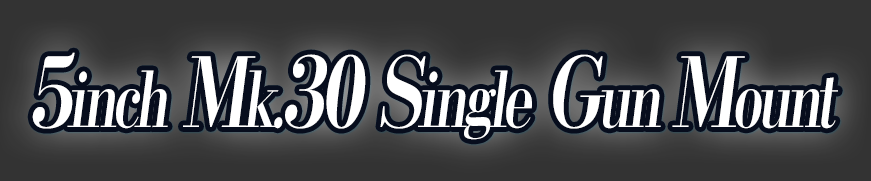
<style>
.page{position:relative;width:871px;height:181px;background:#333333}
.page>*{position:absolute;margin:0}
.t1{font:76.8px "KochoStd-Heavy";letter-spacing:-0.08em;color:#ffffff;font-style:italic;scale:0.72 1}
.t2{font:96px "KochoStd-Heavy";letter-spacing:-0.08em;color:#ffffff;font-style:italic;scale:0.72 1}
</style>
<div class="page">
<p class="t1" style="left:32px;top:52px;width:806px;height:88px"><span class="t2">5</span>inch<span class="t2"> M</span>k.<span class="t2">30 S</span>ingle<span class="t2"> G</span>un <span class="t2">M</span>ount</p>
</div>
